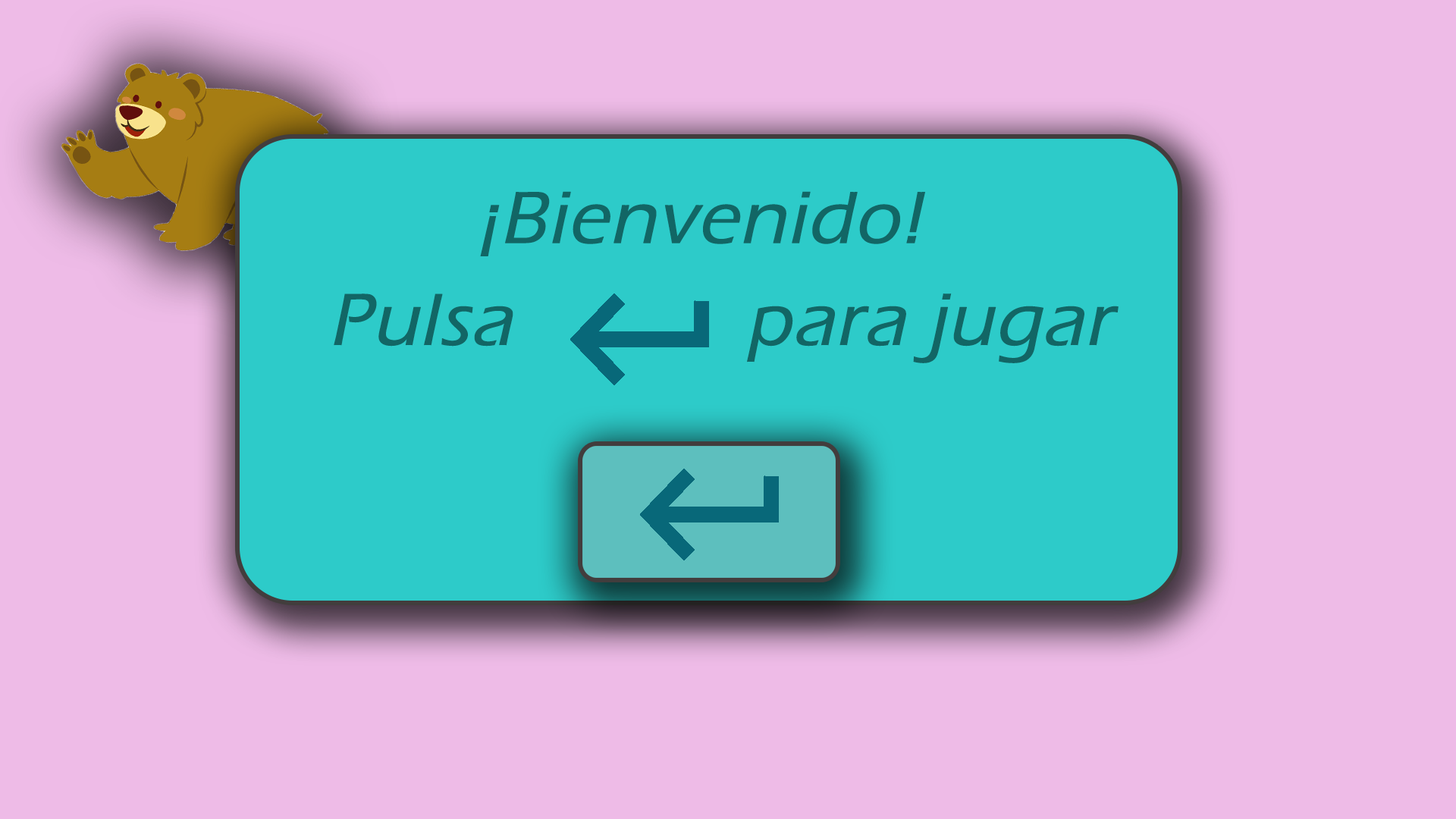
<style>
.page{position:relative;width:1456px;height:819px;background:#eebbe7}
.page>*{position:absolute;margin:0}
.t1{font:75.8px "ErasITC-Medium";color:#126665;font-weight:bold;font-style:italic}
</style>
<div class="page">
<p class="t1" style="left:480px;top:191px;width:445px;height:65px">¡Bienvenido!</p>
<p class="t1" style="left:334px;top:293px;width:785px;height:70px">Pulsa           para jugar</p>
</div>
